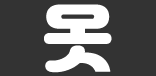
<style>
.page{position:relative;width:156px;height:76px;background:#333333}
.page>*{position:absolute;margin:0}
.t1{font:72px "Jalnan";letter-spacing:0.05em;color:#ffffff;text-transform:uppercase}
</style>
<div class="page">
<p class="t1" style="left:44px;top:4px;width:68px;height:69px">옷</p>
</div>
